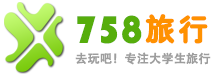
<style>
.page{position:relative;width:218px;height:74px;background:#ffffff}
.page>*{position:absolute;margin:0}
.t1{font:40px "STHupo";color:#56ad0c}
.t2{font:30px "HYe4gj";letter-spacing:0.08em;color:#ff9100;font-weight:bold}
.t3{font:12px "AdobeHeitiStd-Regular";color:#9d9d9d;font-weight:bold}
</style>
<div class="page">
<p class="t1" style="left:77px;top:15px;width:65px;height:29px">758</p>
<p class="t2" style="left:145px;top:14px;width:63px;height:30px">旅行</p>
<p class="t3" style="left:75px;top:52px;width:136px;height:13px">去玩吧！专注大学生旅行</p>
</div>
